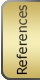
<style>
.page{position:relative;width:40px;height:80px}
.page>*{position:absolute;margin:0}
.t1{font:13.2px "Tahoma";letter-spacing:0.05em}
</style>
<div class="page">
<p class="t1" style="left:16px;top:5px;width:12px;height:70px;rotate:-90deg">References</p>
<p class="t1" style="left:16px;top:5px;width:12px;height:70px;rotate:-90deg">References</p>
<p class="t1" style="left:16px;top:9px;width:12px;height:63px;rotate:-90deg">Education</p>
<p class="t1" style="left:16px;top:9px;width:12px;height:63px;rotate:-90deg">Education</p>
</div>
